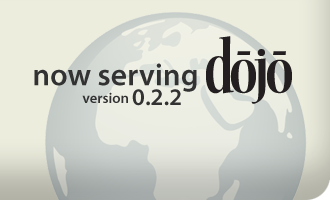
<style>
.page{position:relative;width:330px;height:200px;background:#ededde}
.page>*{position:absolute;margin:0}
.t1{font:31.4px "MyriadPro-Semibold";color:#323232}
.t2{font:24px "MyriadPro-Semibold";color:#323232}
.t3{font:14.7px "MyriadPro-Semibold";color:#323232}
</style>
<div class="page">
<p class="t1" style="left:34px;top:63px;width:163px;height:29px">now serving</p>
<p class="t2" style="left:132px;top:89px;width:49px;height:17px">0.2.2</p>
<p class="t3" style="left:82px;top:92px;width:46px;height:11px">version</p>
</div>
